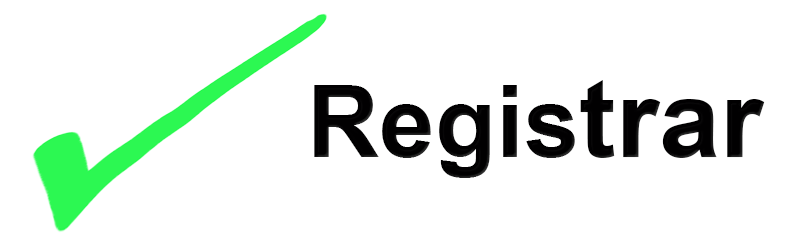
<style>
.page{position:relative;width:800px;height:252px;background:#ffffff}
.page>*{position:absolute;margin:0}
.t1{font:100px "Arial-BoldMT";color:#010001}
.t2{font:110px "Arial-BoldMT";color:#010001}
</style>
<div class="page">
<p class="t1" style="left:314px;top:80px;width:451px;height:98px">Regis<span class="t2">trar</span></p>
</div>
